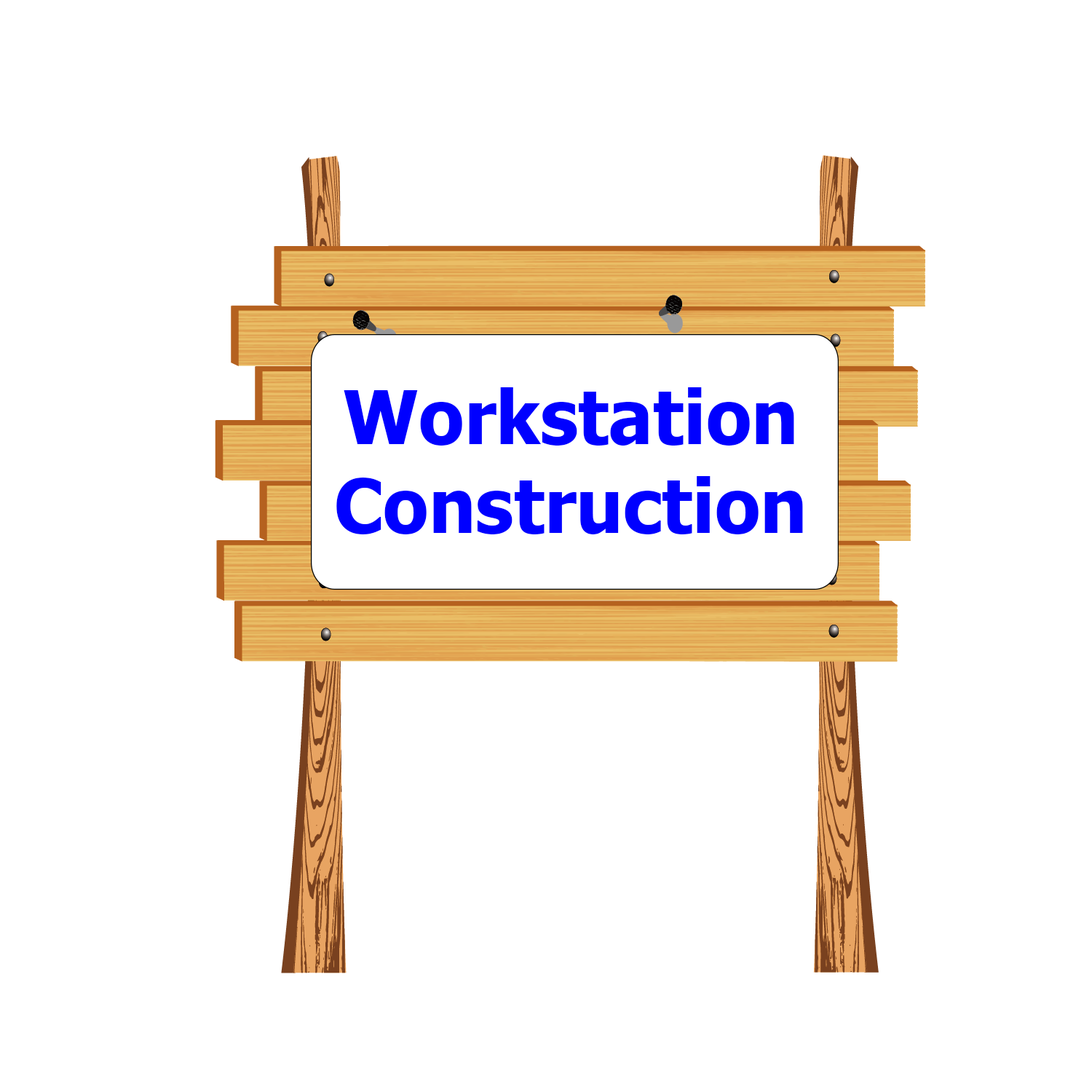
<style>
.page{position:relative;width:1092px;height:1092px;background:#ffffff}
.page>*{position:absolute;margin:0}
.t1{font:74.2px "Tahoma-Bold";color:#0000ff}
</style>
<div class="page">
<p class="t1" style="left:336px;top:387px;width:467px;height:147px;text-align:center">Workstation<br>Construction</p>
</div>
